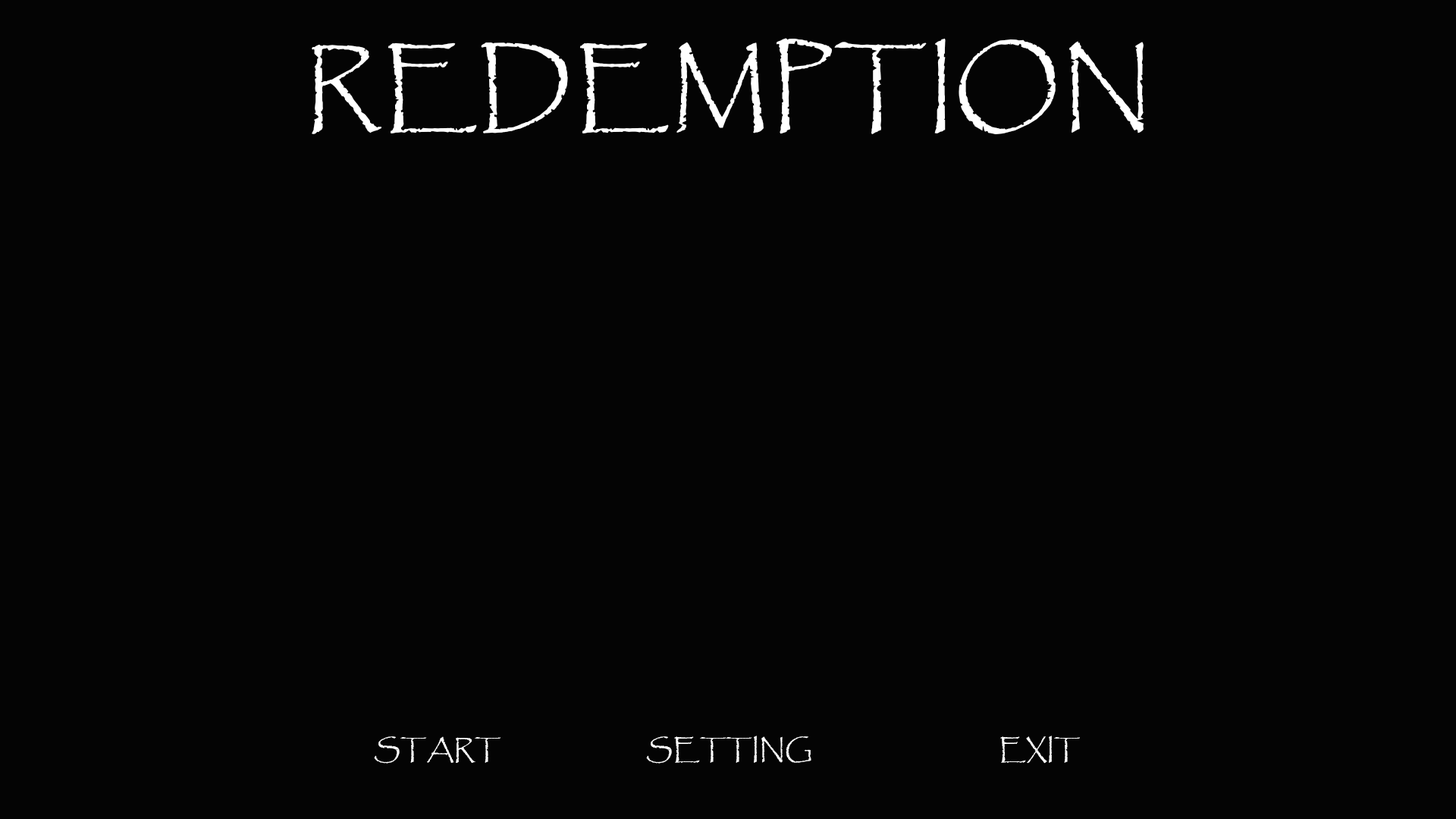
<style>
.page{position:relative;width:1456px;height:819px;background:#040404}
.page>*{position:absolute;margin:0}
.t1{font:97.4px "Papyrus-Regular";color:#ffffff}
.t2{font:27.3px "Papyrus-Regular";color:#ffffff}
</style>
<div class="page">
<p class="t1" style="left:312px;top:38px;width:832px;height:96px">REDEMPTION</p>
<p class="t2" style="left:374px;top:736px;width:706px;height:28px">START                         SETTING                                EXIT</p>
</div>
